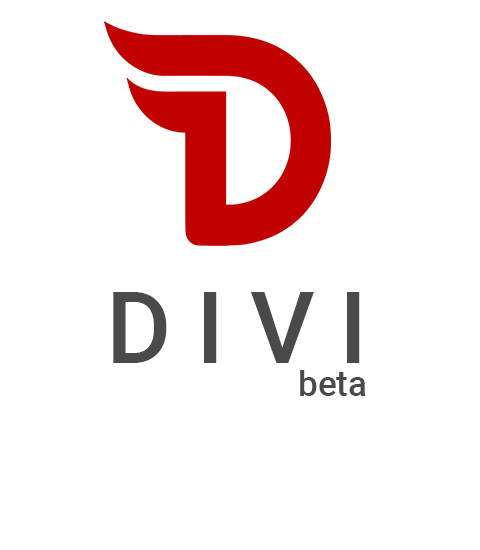
<style>
.page{position:relative;width:480px;height:550px;background:#ffffff}
.page>*{position:absolute;margin:0}
.t1{font:100px "Roboto-Medium";color:#4a4a4a}
.t2{font:35px "Roboto-Medium";color:#4a4a4a}
</style>
<div class="page">
<p class="t1" style="left:113px;top:292px;width:247px;height:71px">D I V I</p>
<p class="t2" style="left:300px;top:370px;width:66px;height:26px">beta</p>
</div>
